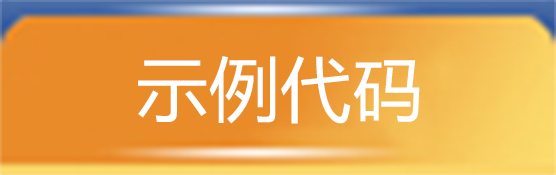
<style>
.page{position:relative;width:556px;height:175px;background:#e98b29}
.page>*{position:absolute;margin:0}
.t1{font:69.4px "MicrosoftYaHei";color:#ffffff;font-weight:bold}
</style>
<div class="page">
<p class="t1" style="left:138px;top:56px;width:282px;height:68px">示例代码</p>
</div>
